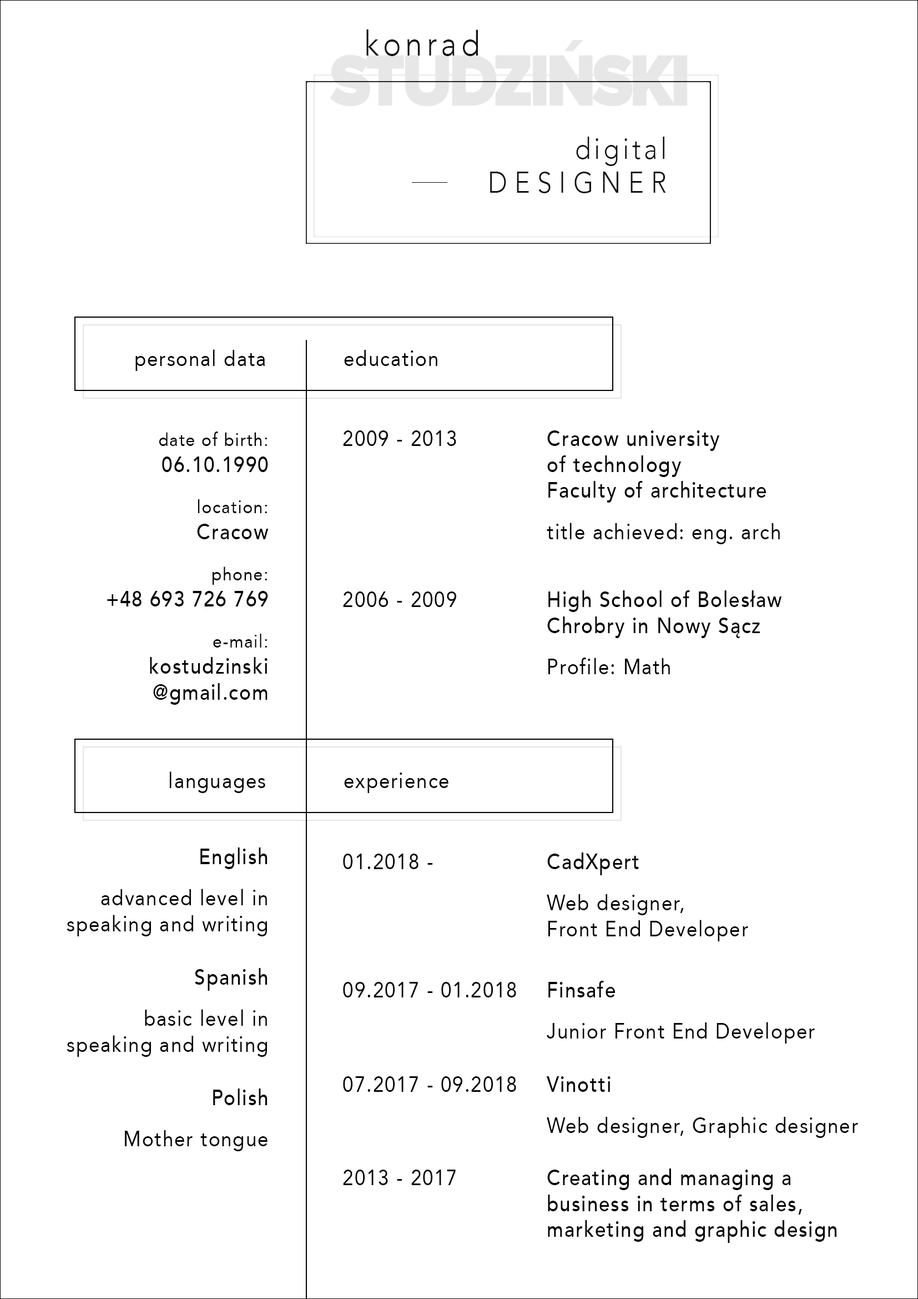
<style>
.page{position:relative;width:918px;height:1299px;background:#ffffff}
.page>*{position:absolute;margin:0}
.t1{font:34.2px "Avenir-Light";letter-spacing:0.14em;color:#101010;scale:0.89 1}
.t2{font:29.3px/34.2px "Avenir-Light";letter-spacing:0.28em;color:#101010;scale:0.89 1}
.t3{font:29.3px/34.2px "Avenir-Light";letter-spacing:0.12em;color:#101010;scale:0.89 1}
.t4{font:21.6px "Avenir-Roman";letter-spacing:0.06em;color:#000000;scale:0.89 1}
.t5{font:21.6px "Avenir-Medium";letter-spacing:0.06em;color:#000000;scale:0.89 1}
.t6{font:18.5px "Avenir-Roman";letter-spacing:0.06em;color:#000000;scale:0.89 1}
.t7{font:18.5px/15.4px "Avenir-Roman";letter-spacing:0.06em;color:#000000;scale:0.89 1}
.t8{font:21.6px/15.4px "Avenir-Roman";letter-spacing:0.06em;color:#000000;scale:0.89 1}
</style>
<div class="page">
<p class="t1" style="left:366px;top:29px;width:112px;height:27px">konrad</p>
<p class="t2" style="left:490px;top:137px;width:176px;height:56px;text-align:right"><span class="t3">digital<br></span>DESIGNER</p>
<p class="t4" style="left:135px;top:349px;width:130px;height:22px">personal data</p>
<p class="t4" style="left:344px;top:350px;width:93px;height:16px">education</p>
<p class="t5" style="left:107px;top:431px;width:162px;height:274px;text-align:right"><span class="t6">date of birth:<br></span>06.10.1990<br><br><span class="t7">location:<br></span>Cracow<br><br><span class="t7">phone:<br></span>+48 693 726 769<br><br><span class="t7">e-mail:<br></span>kostudzinski<br>@gmail.com</p>
<p class="t4" style="left:343px;top:430px;width:113px;height:16px">2009 - 2013</p>
<p class="t5" style="left:547px;top:430px;width:233px;height:114px;text-align:justify">Cracow university<br>of technology<br>Faculty of architecture<br><br><span class="t8">title achieved: eng. arch</span></p>
<p class="t4" style="left:343px;top:591px;width:113px;height:16px">2006 - 2009</p>
<p class="t5" style="left:547px;top:590px;width:235px;height:84px;text-align:justify">High School of Bolesław <br>Chrobry in Nowy Sącz<br><br><span class="t8">Profile: Math</span></p>
<p class="t4" style="left:169px;top:771px;width:96px;height:22px">languages</p>
<p class="t4" style="left:344px;top:772px;width:105px;height:21px">experience</p>
<p class="t4" style="left:67px;top:847px;width:201px;height:89px;text-align:right"><span class="t5">English<br><br></span><span class="t8">advanced level in<br></span>speaking and writing</p>
<p class="t4" style="left:343px;top:853px;width:90px;height:16px">01.2018 -</p>
<p class="t4" style="left:547px;top:852px;width:201px;height:89px;text-align:justify"><span class="t5">CadXpert<br><br></span><span class="t8">Web designer,<br></span>Front End Developer</p>
<p class="t4" style="left:67px;top:968px;width:201px;height:89px;text-align:right"><span class="t5">Spanish<br><br></span><span class="t8">basic level in<br></span>speaking and writing</p>
<p class="t4" style="left:343px;top:982px;width:173px;height:15px">09.2017 - 01.2018</p>
<p class="t8" style="left:547px;top:980px;width:268px;height:63px;text-align:justify"><span class="t5">Finsafe<br><br></span>Junior Front End Developer</p>
<p class="t4" style="left:343px;top:1076px;width:173px;height:15px">07.2017 - 09.2018</p>
<p class="t8" style="left:546px;top:1076px;width:312px;height:62px;text-align:justify"><span class="t5">Vinotti<br><br></span>Web designer, Graphic designer</p>
<p class="t8" style="left:125px;top:1088px;width:143px;height:63px;text-align:right"><span class="t5">Polish<br><br></span>Mother tongue</p>
<p class="t4" style="left:343px;top:1169px;width:113px;height:16px">2013 - 2017</p>
<p class="t5" style="left:547px;top:1168px;width:290px;height:74px;text-align:justify">Creating and managing a <br>business in terms of sales,<br>marketing and graphic design</p>
</div>
